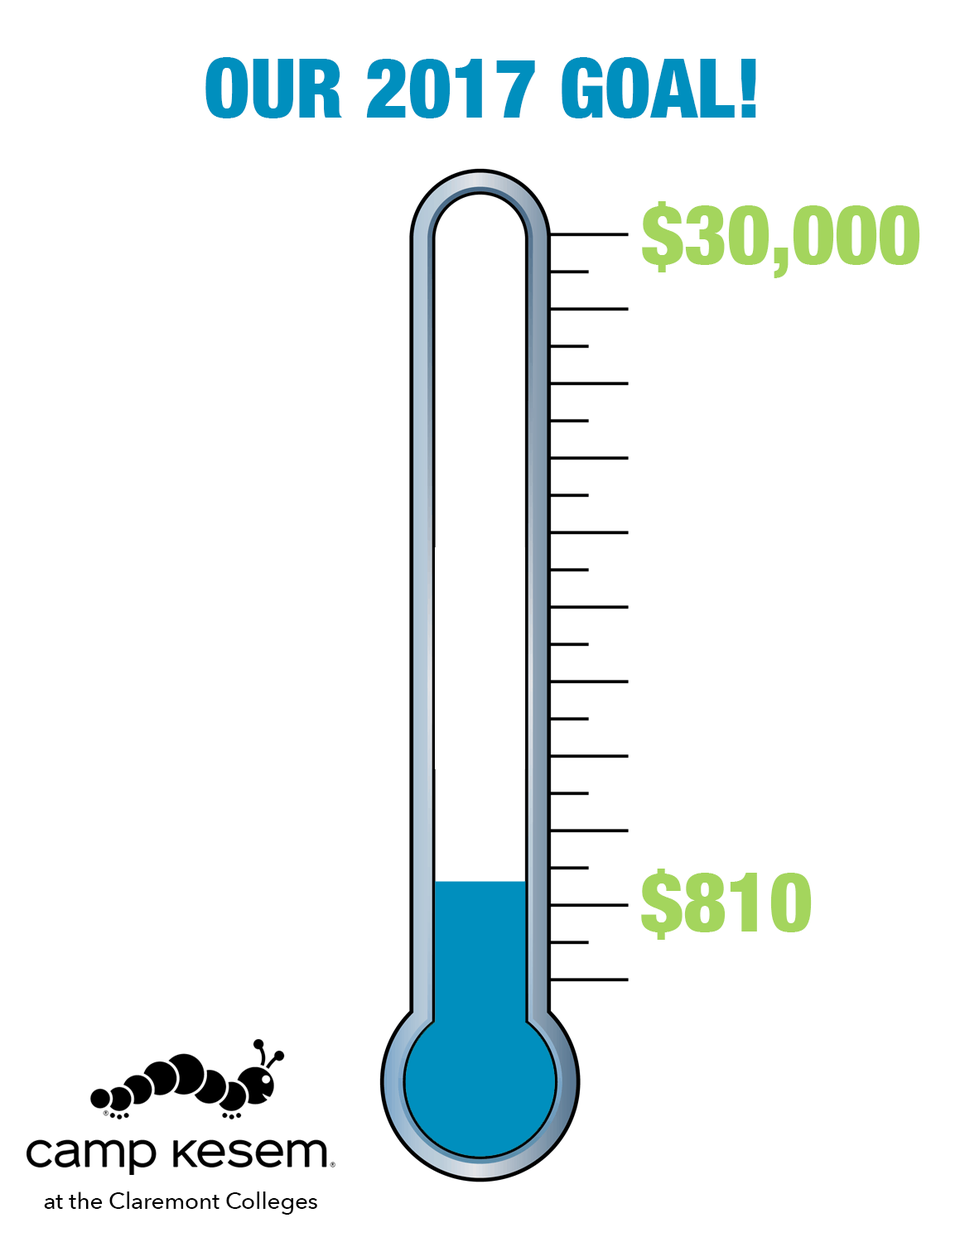
<style>
.page{position:relative;width:960px;height:1242px;background:#ffffff}
.page>*{position:absolute;margin:0}
.t1{font:82.8px "HelveticaNeue-CondensedBlack";color:#008fbe}
.t2{font:82.8px "HelveticaNeue-CondensedBlack";color:#a4d55d}
.t3{font:22.9px "AvenirNext-Medium";color:#000000}
</style>
<div class="page">
<p class="t1" style="left:205px;top:57px;width:551px;height:61px">OUR 2017 GOAL!</p>
<p class="t2" style="left:642px;top:201px;width:278px;height:77px">$30,000</p>
<p class="t2" style="left:641px;top:869px;width:171px;height:71px">$810</p>
<p class="t3" style="left:44px;top:1192px;width:273px;height:23px">at the Claremont Colleges</p>
</div>
